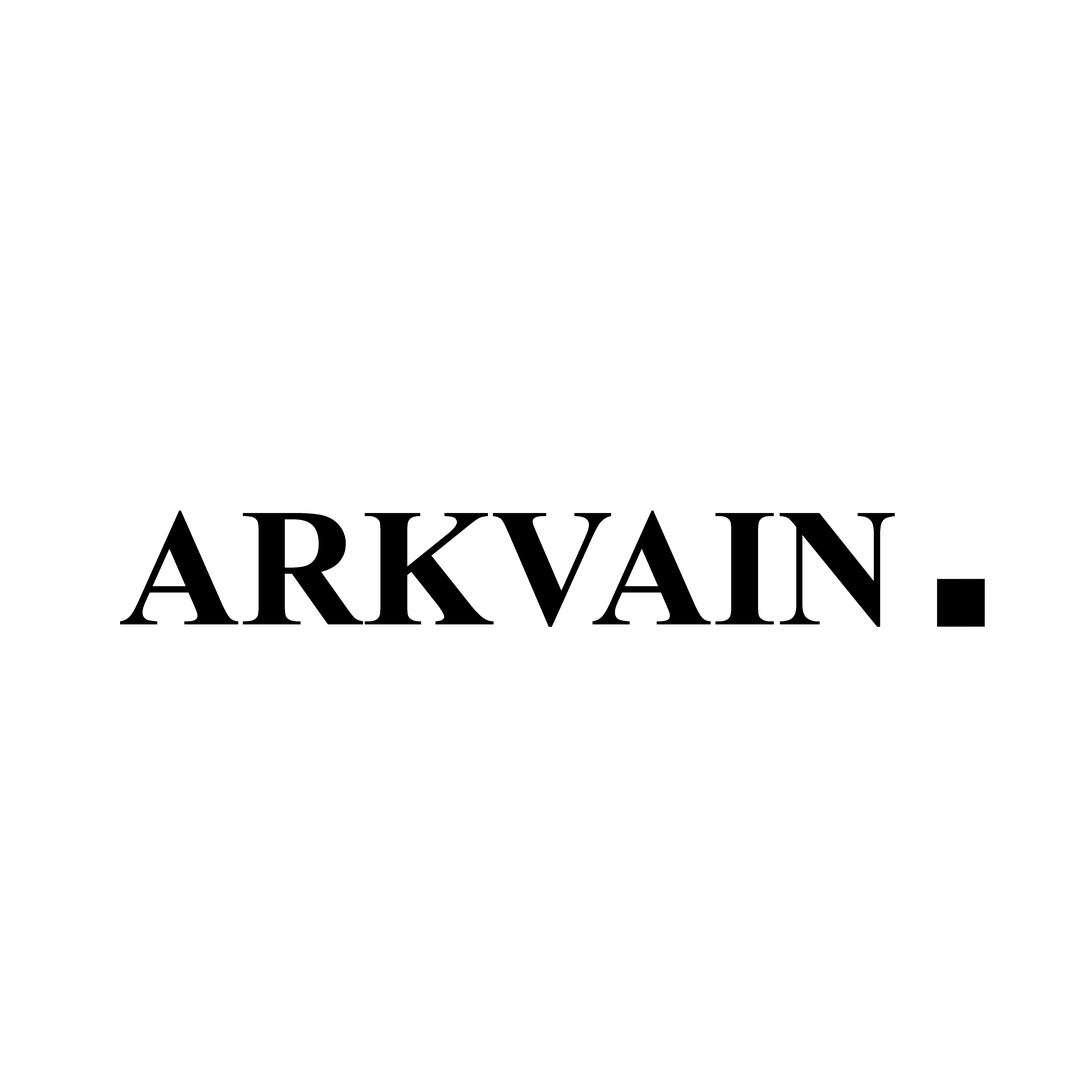
<style>
.page{position:relative;width:1092px;height:1092px;background:#ffffff}
.page>*{position:absolute;margin:0}
.t1{font:167.8px "TimesNewRomanPS-BoldMT";color:#000000}
</style>
<div class="page">
<p class="t1" style="left:120px;top:511px;width:775px;height:116px">ARKVAIN</p>
</div>
